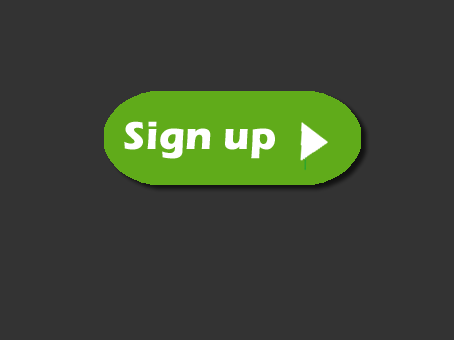
<style>
.page{position:relative;width:454px;height:340px;background:#333333}
.page>*{position:absolute;margin:0}
.t1{font:40px "ErasITC-Bold";letter-spacing:0.01em;color:#ffffff}
.t2{font:36px "MicrosoftYaHei";letter-spacing:0.01em;color:#ffffff}
</style>
<div class="page">
<p class="t1" style="left:124px;top:121px;width:151px;height:38px"><span class="t2">        </span>Sign up</p>
</div>
